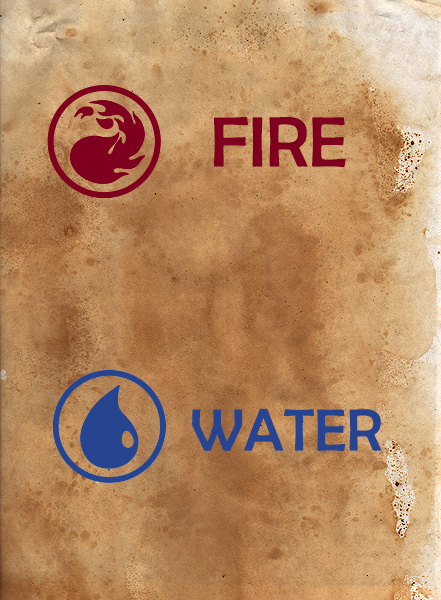
<style>
.page{position:relative;width:441px;height:600px}
.page>*{position:absolute;margin:0}
.t1{font:72px "BerlinSansFB-Reg";color:#7e001e}
.t2{font:60px "BerlinSansFB-Reg";color:#264490}
</style>
<div class="page">
<p class="t1" style="left:214px;top:116px;width:132px;height:52px">FIRE</p>
<p class="t2" style="left:192px;top:408px;width:190px;height:44px">WATER</p>
</div>
